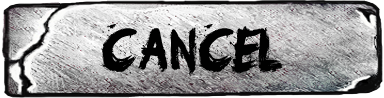
<style>
.page{position:relative;width:384px;height:98px}
.page>*{position:absolute;margin:0}
.t1{font:55px "OhNo";color:#010101}
</style>
<div class="page">
<p class="t1" style="left:98px;top:23px;width:186px;height:54px">CANCEL</p>
</div>
